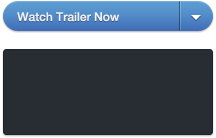
<style>
.page{position:relative;width:216px;height:138px;background:#282d34}
.page>*{position:absolute;margin:0}
.t1{font:12px "HelveticaNeueLTCom-Md";color:#efefef}
</style>
<div class="page">
<p class="t1" style="left:17px;top:12px;width:103px;height:10px">Watch Trailer Now</p>
</div>
